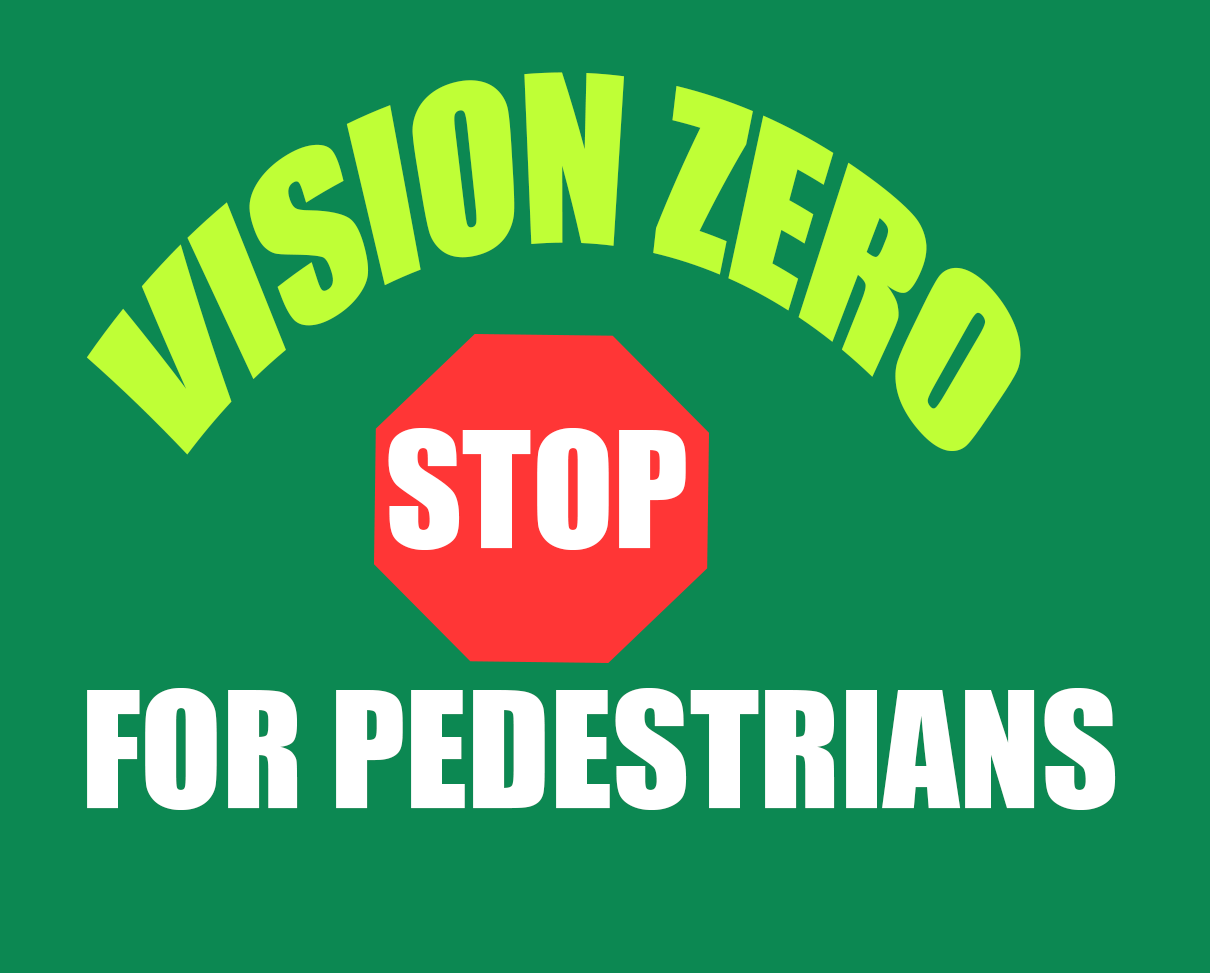
<style>
.page{position:relative;width:1210px;height:973px;background:#0c8852}
.page>*{position:absolute;margin:0}
.t1{font:214px "Impact";color:#bfff36;scale:0.7 1}
.t2{font:148.5px "Impact";color:#ffffff}
</style>
<div class="page">
<p class="t1" style="left:86px;top:72px;width:935px;height:383px">VISION ZERO</p>
<p class="t2" style="left:388px;top:428px;width:298px;height:122px">STOP</p>
<p class="t2" style="left:87px;top:688px;width:1029px;height:122px">FOR PEDESTRIANS</p>
</div>
